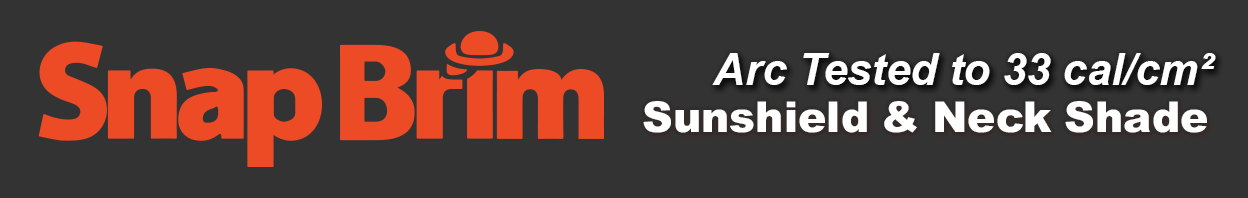
<style>
.page{position:relative;width:1248px;height:198px;background:#333333}
.page>*{position:absolute;margin:0}
.t1{font:43.6px "Arial-BoldItalicMT";color:#ffffff}
.t2{font:42.6px "Arial-Black";color:#ffffff}
</style>
<div class="page">
<p class="t1" style="left:712px;top:53px;width:504px;height:32px">Arc Tested to 33 cal/cm²</p>
<p class="t2" style="left:643px;top:101px;width:564px;height:32px">Sunshield &amp; Neck Shade</p>
</div>
